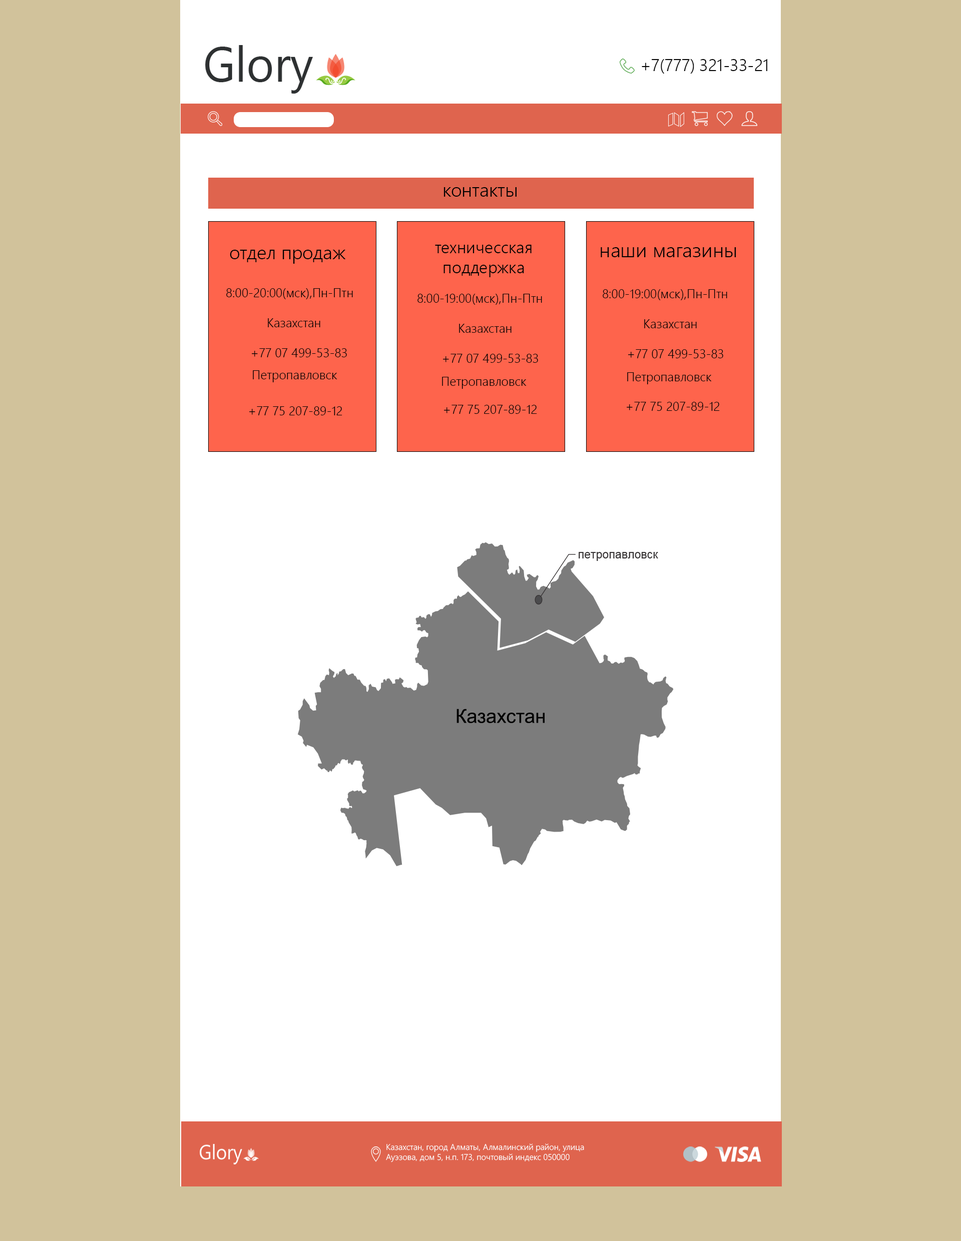
<style>
.page{position:relative;width:961px;height:1241px;background:#d1c29b}
.page>*{position:absolute;margin:0}
.t1{font:16.7px "SegoeUI-Semilight";color:#000000}
.t2{font:18.8px "SegoeUI-Semilight";color:#000000}
.t3{font:19.9px "SegoeUI-Semilight";color:#000000}
.t4{font:12.5px "SegoeUI-Semilight";color:#000000}
.t5{font:8.4px "SegoeUI-Semilight";color:#ffffff}
</style>
<div class="page">
<p class="t1" style="left:642px;top:59px;width:125px;height:15px">+7(777) 321-33-21</p>
<p class="t2" style="left:444px;top:187px;width:72px;height:10px">контакты</p>
<p class="t1" style="left:435px;top:245px;width:96px;height:32px;text-align:center">техничесская <br>поддержка</p>
<p class="t2" style="left:230px;top:250px;width:116px;height:14px">отдел продаж</p>
<p class="t3" style="left:601px;top:247px;width:135px;height:10px">наши магазины</p>
<p class="t4" style="left:226px;top:288px;width:127px;height:69px">8:00-20:00(мск),Пн-Птн<br><br>            Казахстан  <br><br>    +77 07 499-53-83</p>
<p class="t4" style="left:417px;top:294px;width:125px;height:69px">8:00-19:00(мск),Пн-Птн<br><br>            Казахстан  <br><br>    +77 07 499-53-83</p>
<p class="t4" style="left:603px;top:289px;width:124px;height:69px">8:00-19:00(мск),Пн-Птн<br><br>            Казахстан  <br><br>    +77 07 499-53-83</p>
<p class="t4" style="left:253px;top:370px;width:84px;height:12px">Петропавловск</p>
<p class="t4" style="left:442px;top:377px;width:84px;height:12px">Петропавловск</p>
<p class="t4" style="left:627px;top:372px;width:85px;height:12px">Петропавловск</p>
<p class="t4" style="left:627px;top:402px;width:93px;height:9px">+77 75 207-89-12</p>
<p class="t4" style="left:249px;top:406px;width:93px;height:9px">+77 75 207-89-12</p>
<p class="t4" style="left:444px;top:405px;width:93px;height:9px">+77 75 207-89-12</p>
<p class="t5" style="left:386px;top:1143px;width:198px;height:19px">Казахстан, город Алматы, Алмалинский район, улица Ауэзова, дом 5, н.п. 173, почтовый индекс 050000</p>
</div>
